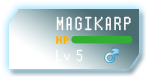
<style>
.page{position:relative;width:148px;height:78px}
.page>*{position:absolute;margin:0}
.t1{font:19px "Pokemon-Text";letter-spacing:0.14em;color:#ffffff}
.t2{font:16px "Pokemon-Text";letter-spacing:0.14em;color:#ffffff}
</style>
<div class="page">
<p class="t1" style="left:56px;top:16px;width:75px;height:15px">MAGIKARP</p>
<p class="t2" style="left:56px;top:49px;width:27px;height:13px">Lv 5</p>
</div>
